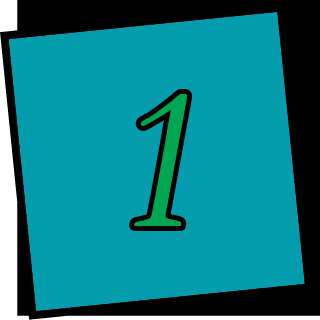
<style>
.page{position:relative;width:320px;height:320px;background:#049dae}
.page>*{position:absolute;margin:0}
.t1{font:208.3px "Garamond";color:#00a651;font-style:italic}
</style>
<div class="page">
<p class="t1" style="left:134px;top:94px;width:53px;height:132px">1</p>
</div>
